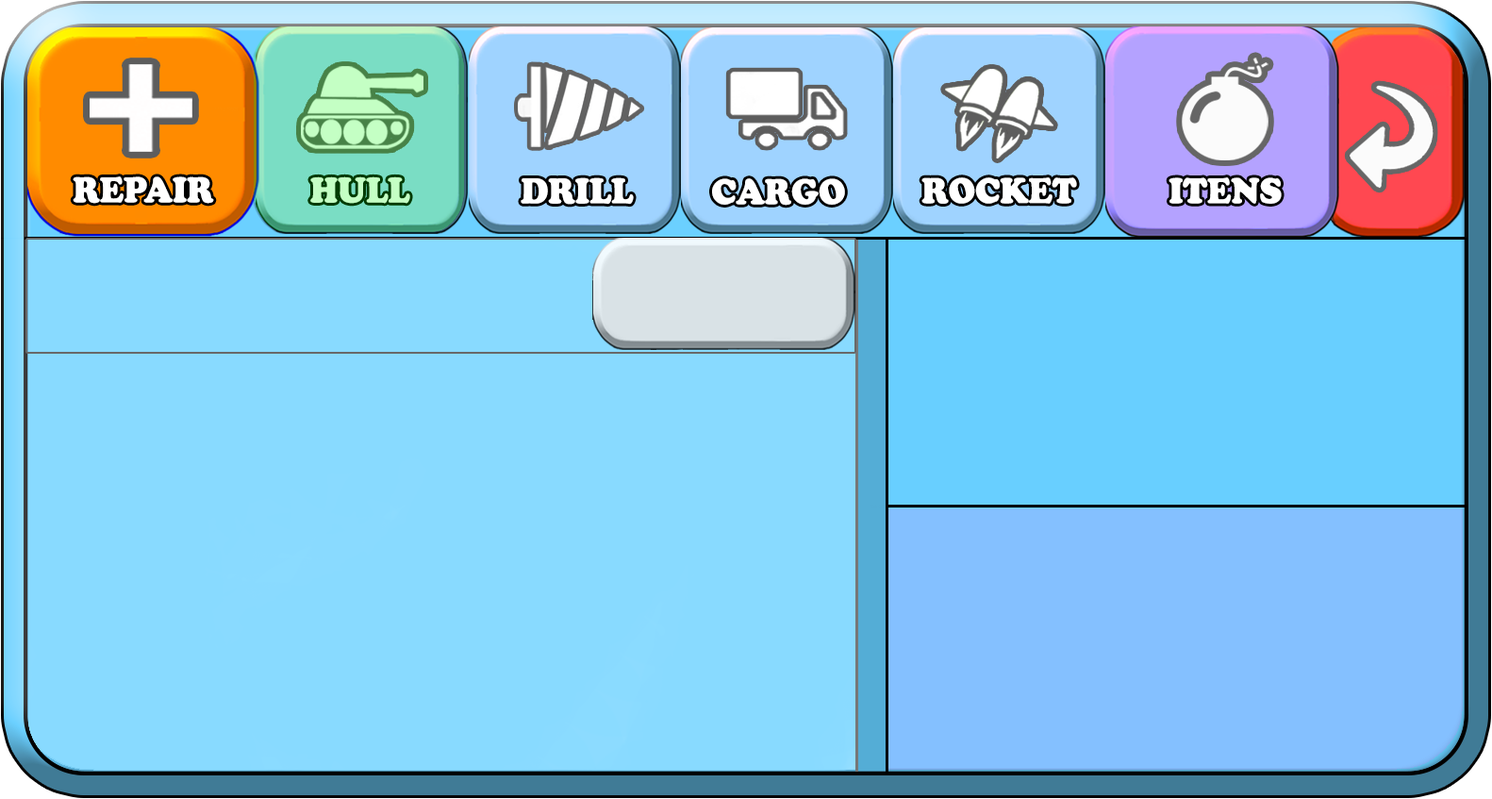
<style>
.page{position:relative;width:1492px;height:799px;background:#88daff}
.page>*{position:absolute;margin:0}
.t1{font:35.2px "CooperBlackStd";color:#ffffff;scale:0.93 1}
.t2{font:35.2px "CooperBlackStd";color:#c4ffc4;scale:0.93 1}
</style>
<div class="page">
<p class="t1" style="left:73px;top:176px;width:141px;height:28px">REPAIR</p>
<p class="t2" style="left:310px;top:176px;width:100px;height:28px">HULL</p>
<p class="t1" style="left:521px;top:177px;width:113px;height:28px">DRILL</p>
<p class="t1" style="left:712px;top:178px;width:133px;height:28px">CARGO</p>
<p class="t1" style="left:922px;top:177px;width:155px;height:27px">ROCKET</p>
<p class="t1" style="left:1169px;top:177px;width:113px;height:27px">ITENS</p>
</div>
